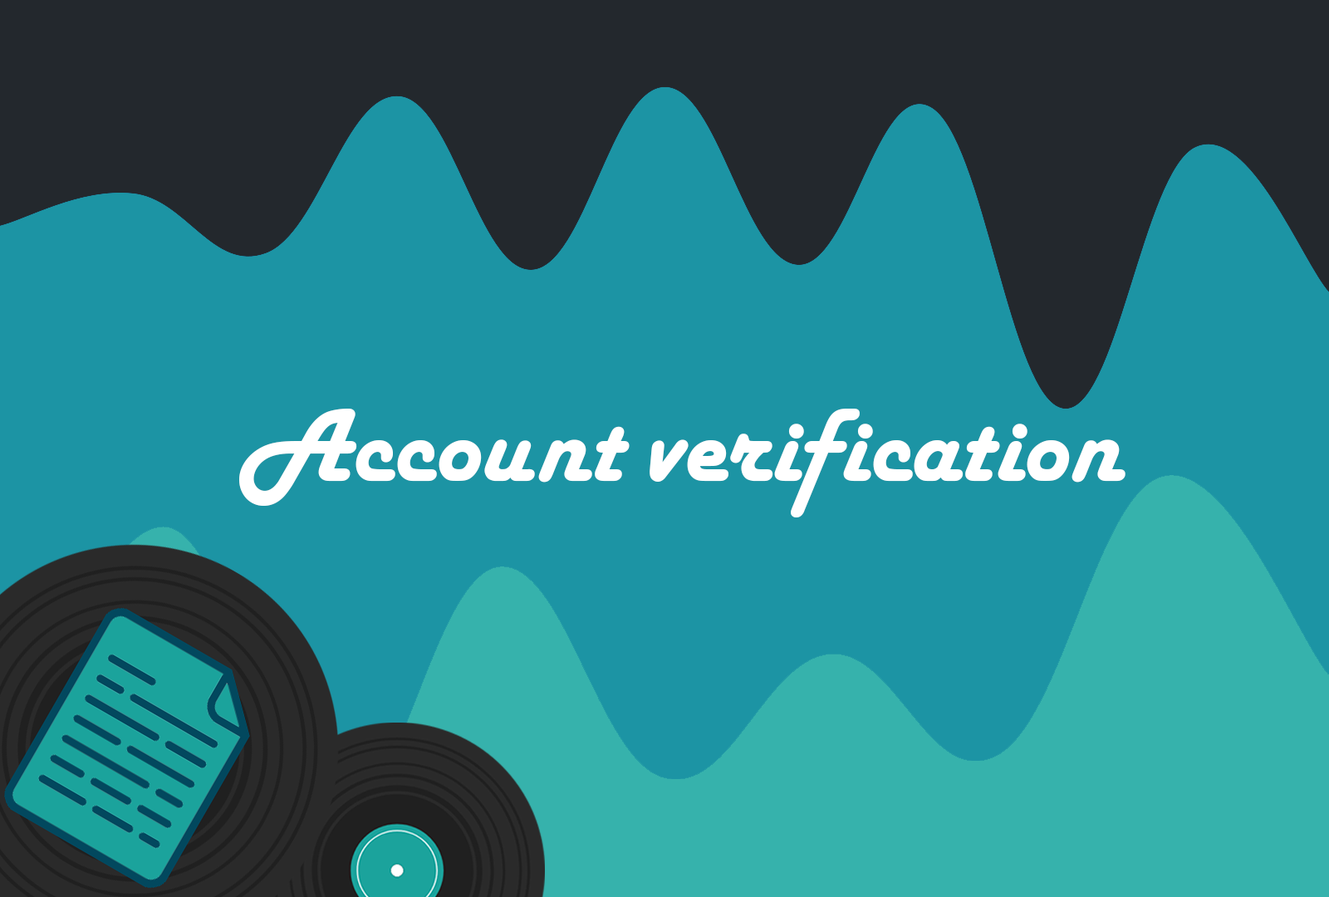
<style>
.page{position:relative;width:1329px;height:897px;background:#1c94a4}
.page>*{position:absolute;margin:0}
.t1{font:108px "HarlowSolidPlain";color:#ffffff}
</style>
<div class="page">
<p class="t1" style="left:239px;top:409px;width:887px;height:109px">Account verification</p>
</div>
